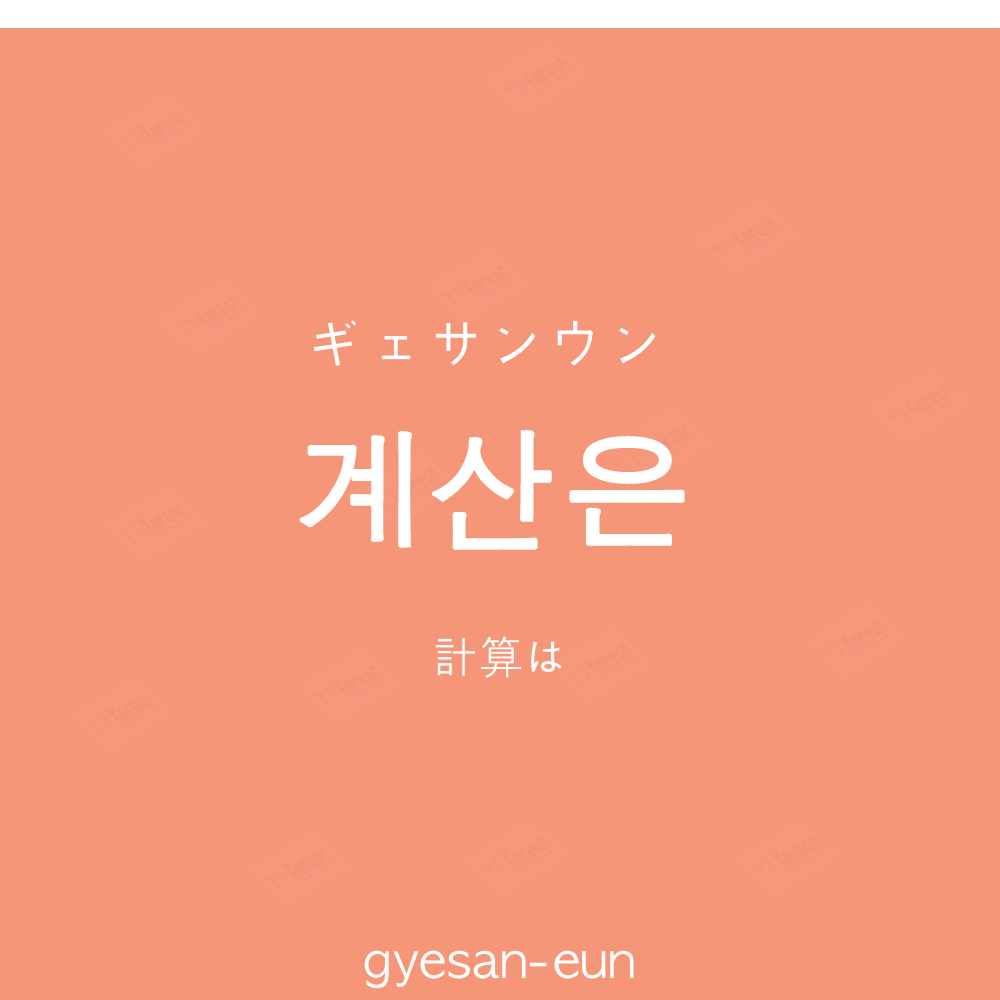
<style>
.page{position:relative;width:1000px;height:1000px;background:#f69679}
.page>*{position:absolute;margin:0}
.t1{font:60px "AppleGothic";color:#ffffff}
.t2{font:130px "AppleGothic";color:#ffffff;font-weight:bold}
.t3{font:45px "AppleGothic";color:#ffffff}
.t4{font:50px "AppleGothic";color:#ffffff}
</style>
<div class="page">
<p class="t1" style="left:313px;top:320px;width:343px;height:46px">ギェサンウン</p>
<p class="t2" style="left:299px;top:430px;width:386px;height:120px">계산은</p>
<p class="t3" style="left:435px;top:636px;width:127px;height:42px">計算は</p>
<p class="t4" style="left:364px;top:950px;width:270px;height:39px">gyesan-eun</p>
</div>
